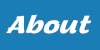
<style>
.page{position:relative;width:100px;height:50px;background:#1a7db6}
.page>*{position:absolute;margin:0}
.t1{font:24px "ArturoTrial-BoldItalic";color:#ffffff;font-style:italic}
</style>
<div class="page">
<p class="t1" style="left:6px;top:14px;width:85px;height:20px">About</p>
</div>
